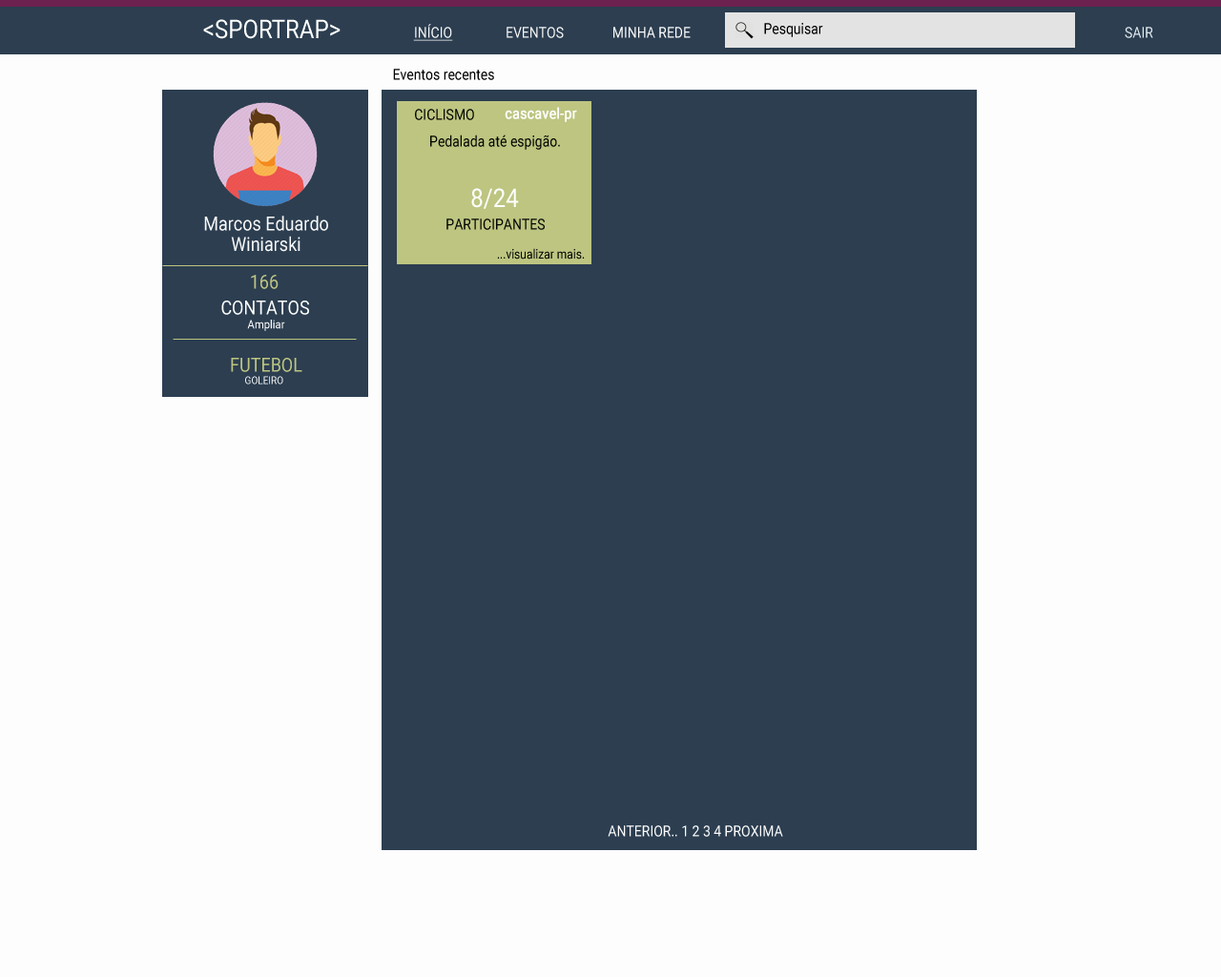
<style>
.page{position:relative;width:1221px;height:977px;background:#fdfdfd}
.page>*{position:absolute;margin:0}
.t1{font:15px "Roboto-Regular";color:#f8f8f8;text-decoration:underline;scale:0.89 1}
.t2{font:15px "Roboto-Regular";color:#f8f8f8;scale:0.89 1}
.t3{font:15px "Roboto-Regular";color:#fffefe;scale:0.89 1}
.t4{font:15px "Roboto-Regular";color:#000000;scale:0.89 1}
.t5{font:15px "Roboto-Regular";color:#e1e9ee;scale:0.89 1}
.t6{font:15px "Roboto-Regular";color:#040501;scale:0.89 1}
.t7{font:15px "Roboto-Regular";color:#ffffff;font-weight:bold;scale:0.89 1}
.t8{font:25.6px "Roboto-Regular";color:#ffffff;scale:0.89 1}
.t9{font:19.2px "Roboto-Regular";color:#f9f9f9;scale:0.89 1}
.t10{font:12.8px "Roboto-Regular";color:#040501;scale:0.89 1}
.t11{font:19.2px "Roboto-Regular";color:#bdc581;scale:0.89 1}
.t12{font:19.2px "Roboto-Regular";color:#ffffff;scale:0.89 1}
.t13{font:11.8px "Roboto-Regular";color:#fdfdfd;scale:0.91 1}
.t14{font:10.7px "Roboto-Regular";color:#fdfdfc;scale:0.89 1}
.t15{font:15px "Roboto-Regular";color:#fdfdfd;scale:0.89 1}
</style>
<div class="page">
<p class="t1" style="left:413px;top:24px;width:40px;height:17px">INÍCIO</p>
<p class="t2" style="left:506px;top:27px;width:58px;height:11px">EVENTOS</p>
<p class="t3" style="left:613px;top:27px;width:78px;height:11px">MINHA REDE</p>
<p class="t4" style="left:764px;top:23px;width:59px;height:14px">Pesquisar</p>
<p class="t5" style="left:1125px;top:27px;width:28px;height:11px">SAIR</p>
<p class="t4" style="left:393px;top:69px;width:101px;height:11px">Eventos recentes</p>
<p class="t6" style="left:415px;top:109px;width:59px;height:11px">CICLISMO</p>
<p class="t7" style="left:505px;top:107px;width:72px;height:15px">cascavel-pr</p>
<p class="t6" style="left:430px;top:134px;width:130px;height:16px">Pedalada até espigão.</p>
<p class="t8" style="left:471px;top:188px;width:48px;height:21px">8/24</p>
<p class="t9" style="left:204px;top:216px;width:124px;height:36px;text-align:center">Marcos Eduardo Winiarski</p>
<p class="t6" style="left:446px;top:218px;width:99px;height:12px">PARTICIPANTES</p>
<p class="t10" style="left:497px;top:248px;width:88px;height:11px">...visualizar mais.</p>
<p class="t11" style="left:251px;top:275px;width:28px;height:14px">166</p>
<p class="t12" style="left:221px;top:300px;width:88px;height:15px">CONTATOS</p>
<p class="t13" style="left:247px;top:320px;width:38px;height:11px">Ampliar rede</p>
<p class="t11" style="left:231px;top:358px;width:71px;height:14px">FUTEBOL</p>
<p class="t14" style="left:245px;top:376px;width:38px;height:8px">GOLEIRO</p>
<p class="t15" style="left:608px;top:825px;width:175px;height:11px">ANTERIOR.. 1 2 3 4 PROXIMA</p>
</div>
